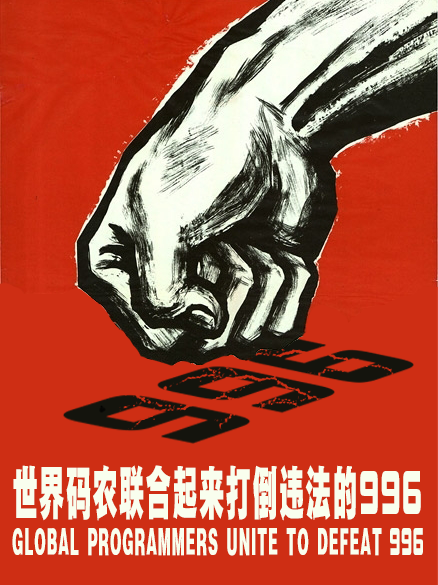
<style>
.page{position:relative;width:438px;height:585px;background:#ce2e14}
.page>*{position:absolute;margin:0}
.t1{font:60px "FZYDTHJW--GB1-0";letter-spacing:0.06em;color:#f9feee;scale:0.42 1}
.t2{font:60px "DFPZongYiW9";letter-spacing:0.06em;color:#f9feee;scale:0.42 1}
.t3{font:32px "FZYDTHJW--GB1-0";letter-spacing:0.06em;color:#f9feee;scale:0.42 1}
.t4{font:37.6px "DFPZongYiW9";letter-spacing:0.06em;color:#f9feee;scale:0.37 1}
</style>
<div class="page">
<p class="t1" style="left:13px;top:465px;width:408px;height:56px">世界码农联合起来打倒违法的<span class="t2">996</span></p>
<p class="t3" style="left:12px;top:528px;width:370px;height:28px">GLOBAL PROGRAMMERS UNITE TO DEFEAT</p>
<p class="t4" style="left:390px;top:528px;width:33px;height:27px">996</p>
</div>
